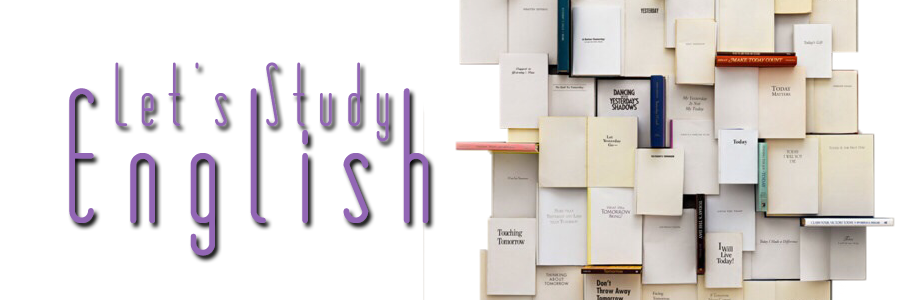
<style>
.page{position:relative;width:900px;height:300px;background:#ffffff}
.page>*{position:absolute;margin:0}
.t1{font:84.4px "Matchbook";letter-spacing:0.1em;color:#9266b5}
.t2{font:179.4px "Matchbook";letter-spacing:0.1em;color:#9266b5}
</style>
<div class="page">
<p class="t1" style="left:115px;top:62px;width:274px;height:80px">Let’s Study</p>
<p class="t2" style="left:69px;top:88px;width:360px;height:168px">English</p>
</div>
